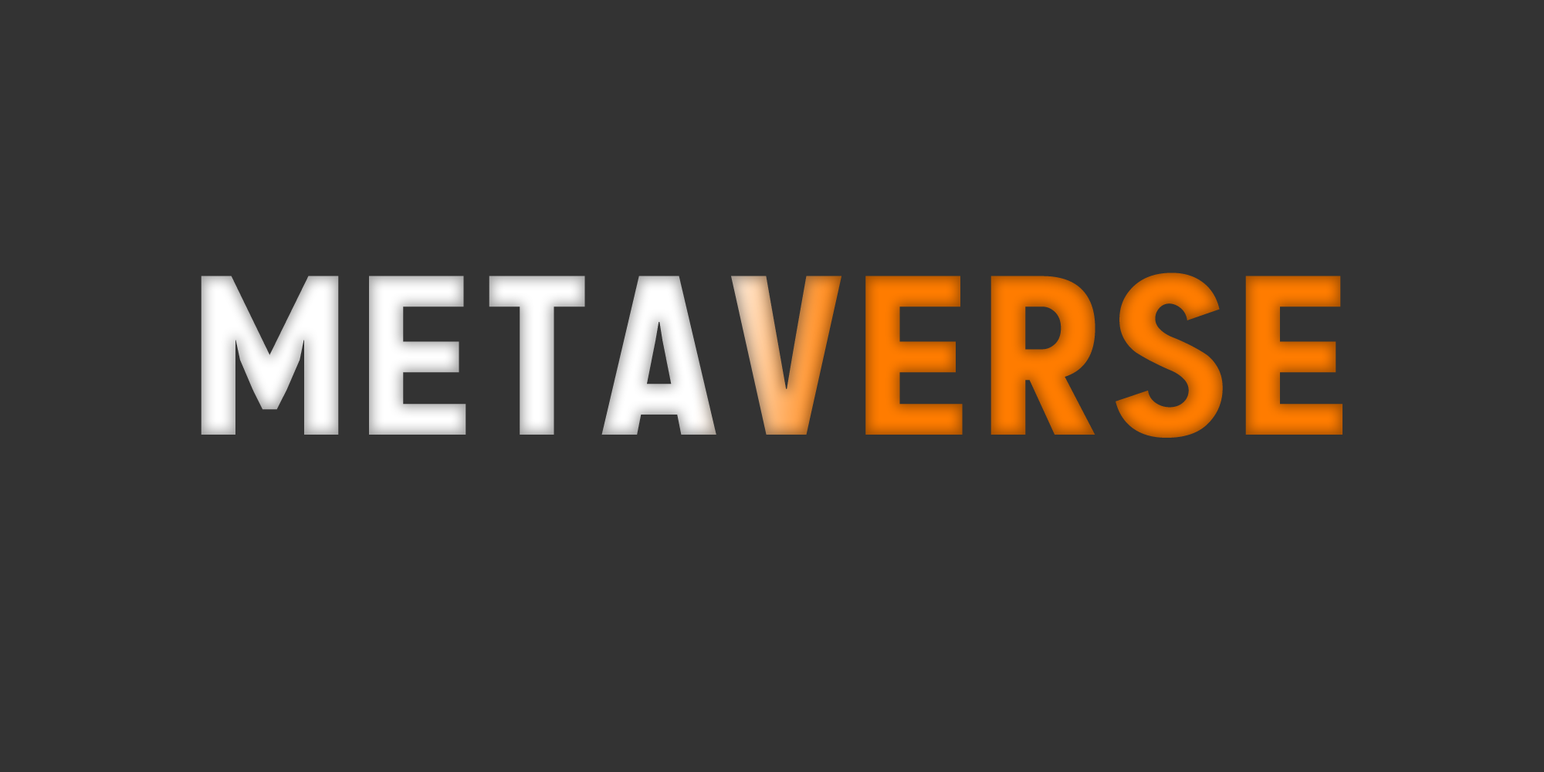
<style>
.page{position:relative;width:1544px;height:772px;background:#333333}
.page>*{position:absolute;margin:0}
.t1{font:205.9px "dDiam";letter-spacing:0.05em}
</style>
<div class="page">
<p class="t1" style="left:201px;top:273px;width:1142px;height:165px">METAVERSE</p>
</div>
